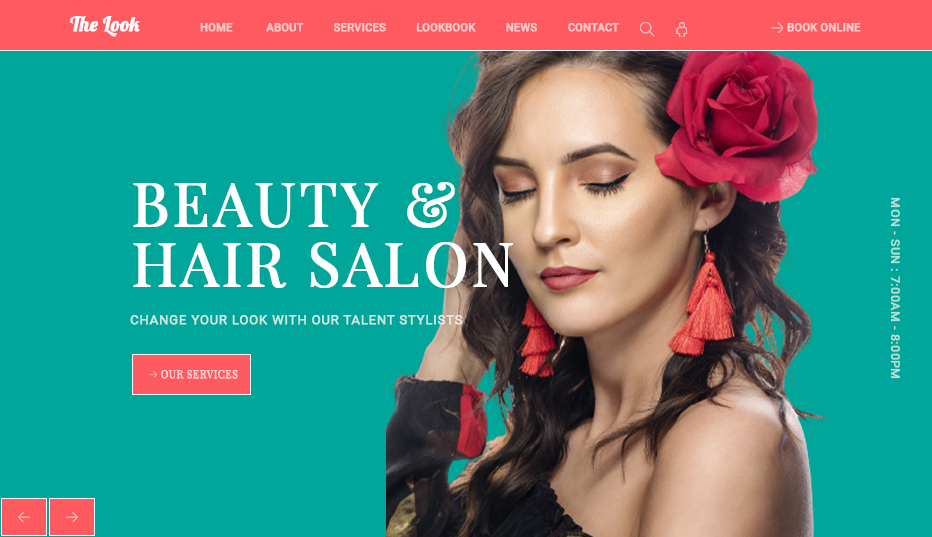
<style>
.page{position:relative;width:932px;height:537px;background:#00a699}
.page>*{position:absolute;margin:0}
.t1{font:20px "Lobster-Regular";color:#ffffff;font-weight:bold}
.t2{font:11px "Roboto-Medium";color:#ffc8c9;font-weight:bold}
.t3{font:60px/60px "PlayfairDisplay-Regular";letter-spacing:0.04em;color:#ffffff;font-weight:bold}
.t4{font:12px "Roboto-Regular";letter-spacing:0.04em;color:#b8deda;font-weight:bold}
.t5{font:13px "Roboto-Regular";letter-spacing:0.04em;color:#cbe7e4;font-weight:bold}
.t6{font:10.1px "PlayfairDisplay-Regular";letter-spacing:0.04em;color:#ffd7d7;font-weight:bold}
</style>
<div class="page">
<p class="t1" style="left:70px;top:16px;width:70px;height:21px">The Look</p>
<p class="t2" style="left:200px;top:23px;width:419px;height:9px">HOME           ABOUT          SERVICES          LOOKBOOK          NEWS          CONTACT</p>
<p class="t2" style="left:787px;top:23px;width:74px;height:9px">BOOK ONLINE</p>
<p class="t3" style="left:133px;top:182px;width:380px;height:106px">BEAUTY  &amp;<br>HAIR SALON</p>
<p class="t4" style="left:890px;top:197px;width:10px;height:182px;rotate:90deg">MON - SUN : 7:00AM - 8:00PM</p>
<p class="t5" style="left:130px;top:315px;width:333px;height:10px">CHANGE YOUR LOOK WITH OUR TALENT STYLISTS</p>
<p class="t6" style="left:161px;top:370px;width:77px;height:9px">OUR SERVICES</p>
</div>
